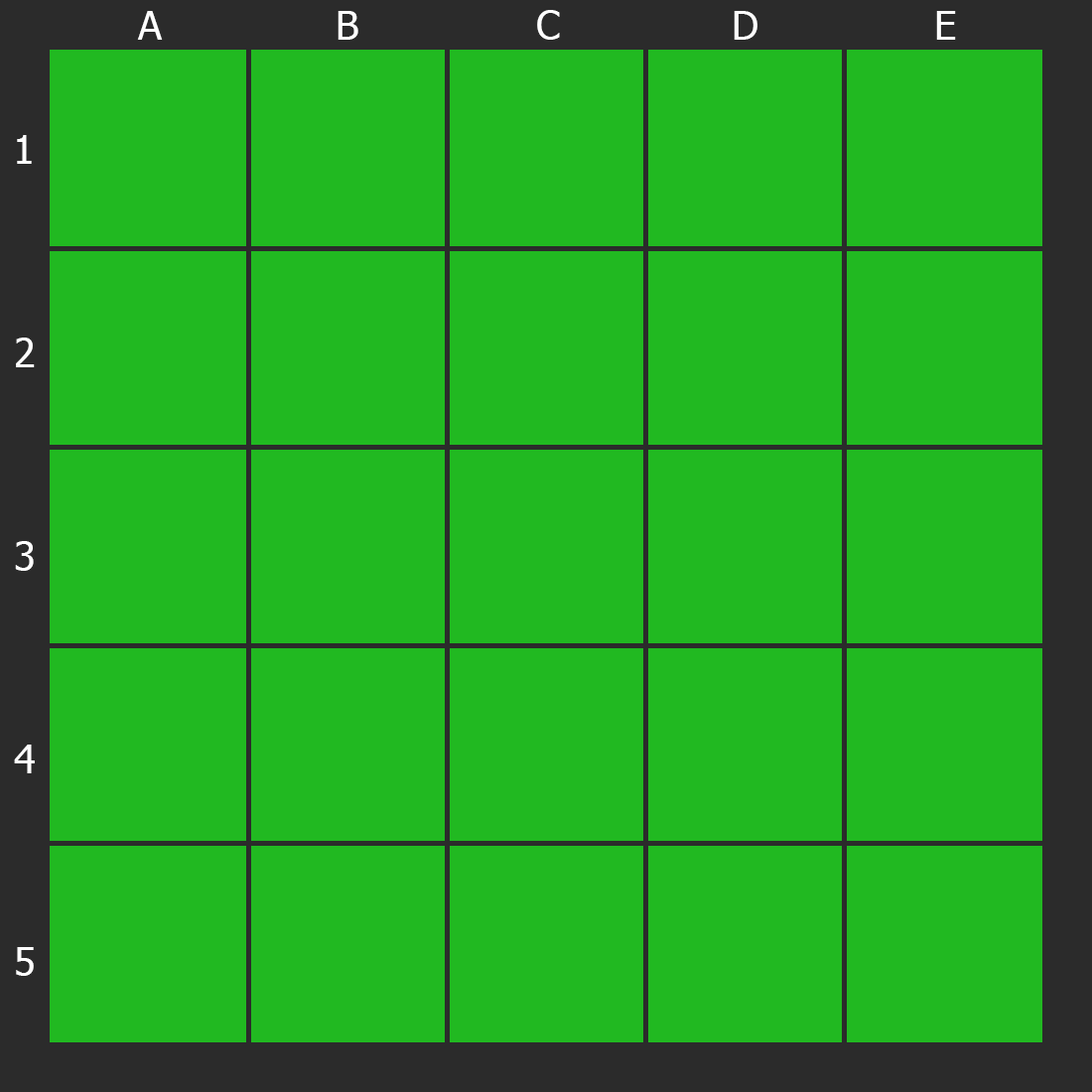
<style>
.page{position:relative;width:1092px;height:1092px;background:#21b921}
.page>*{position:absolute;margin:0}
.t1{font:39.7px "Tahoma";color:#fefefe}
</style>
<div class="page">
<p class="t1" style="left:137px;top:11px;width:26px;height:29px">A</p>
<p class="t1" style="left:338px;top:11px;width:20px;height:29px">B</p>
<p class="t1" style="left:537px;top:10px;width:23px;height:30px">C</p>
<p class="t1" style="left:734px;top:11px;width:23px;height:29px">D</p>
<p class="t1" style="left:936px;top:11px;width:20px;height:29px">E</p>
<p class="t1" style="left:17px;top:135px;width:15px;height:29px">1</p>
<p class="t1" style="left:16px;top:338px;width:19px;height:29px">2</p>
<p class="t1" style="left:15px;top:541px;width:19px;height:30px">3</p>
<p class="t1" style="left:14px;top:745px;width:21px;height:28px">4</p>
<p class="t1" style="left:16px;top:947px;width:18px;height:29px">5</p>
</div>
